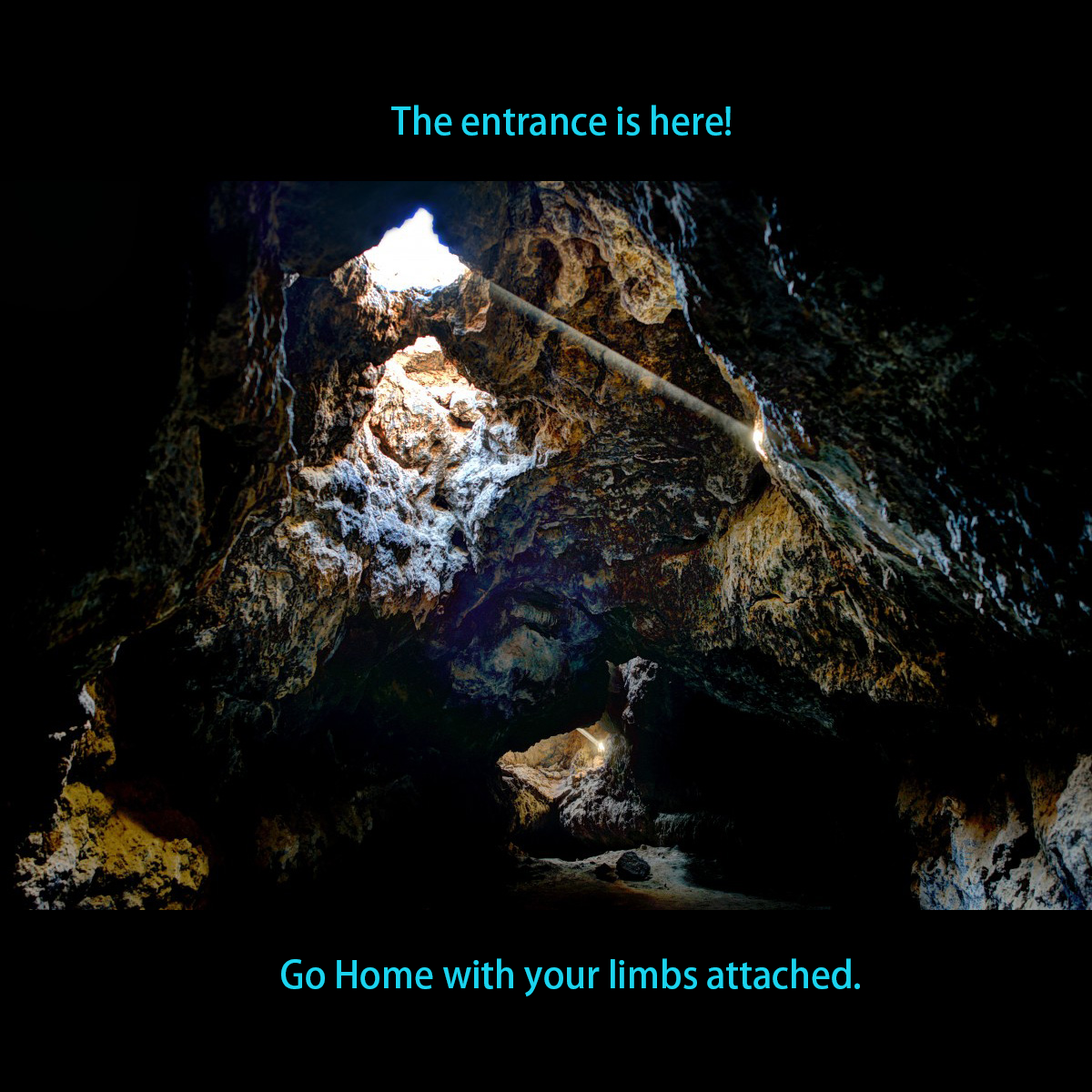
<style>
.page{position:relative;width:1092px;height:1092px;background:#000000}
.page>*{position:absolute;margin:0}
.t1{font:36.4px "AdobeFanHeitiStd-Bold";color:#1bd4ef}
</style>
<div class="page">
<p class="t1" style="left:391px;top:105px;width:340px;height:31px">The entrance is here!</p>
<p class="t1" style="left:281px;top:958px;width:579px;height:38px">Go Home with your limbs attached.</p>
</div>
